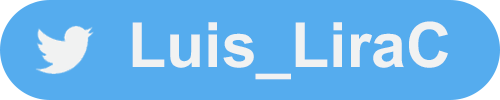
<style>
.page{position:relative;width:500px;height:100px;background:#55acee}
.page>*{position:absolute;margin:0}
.t1{font:62.5px "Arial-BoldMT";color:#f1f2f2}
</style>
<div class="page">
<p class="t1" style="left:132px;top:21px;width:316px;height:59px">Luis_LiraC</p>
</div>
